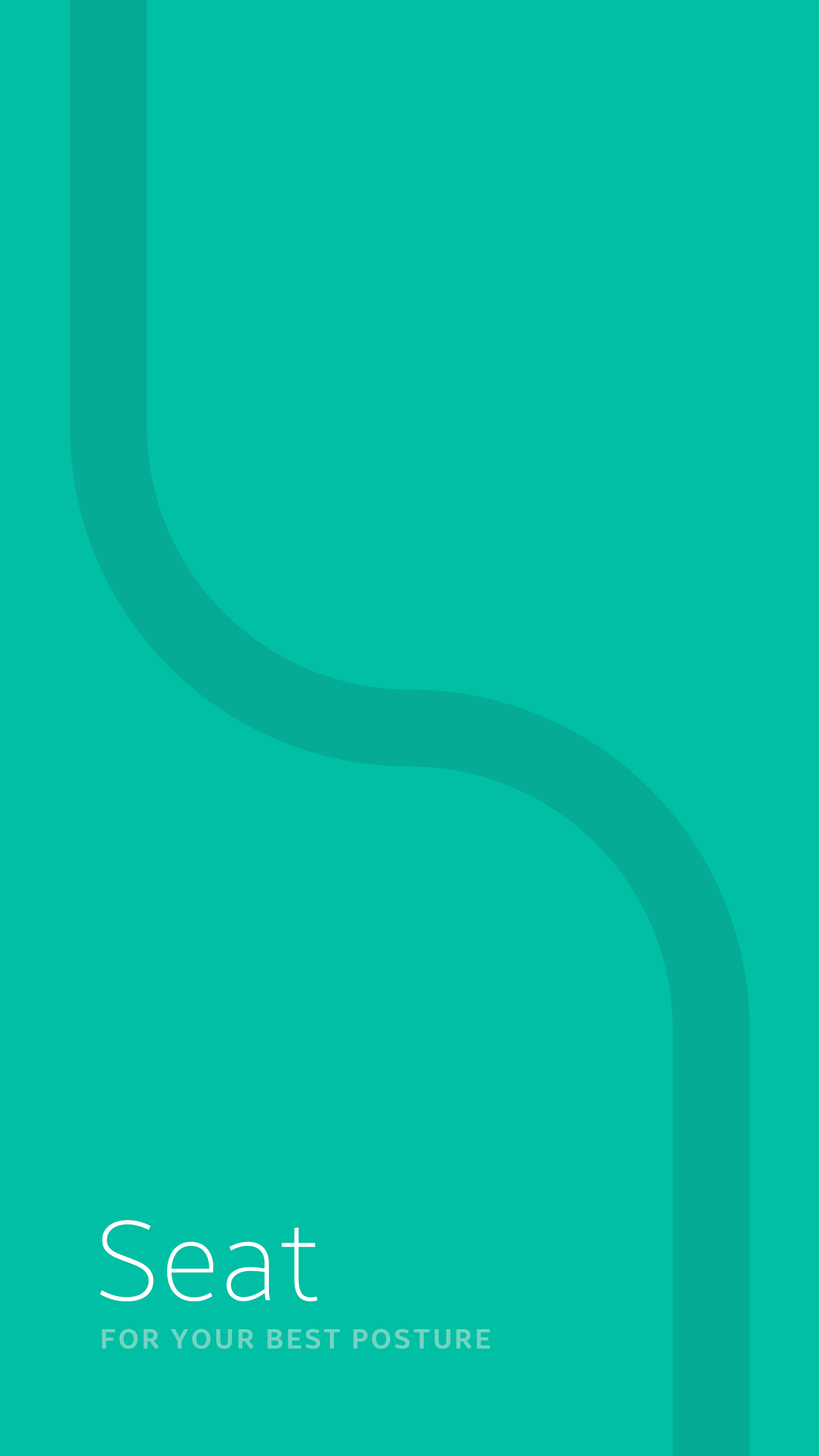
<style>
.page{position:relative;width:819px;height:1456px;background:#00bfa5}
.page>*{position:absolute;margin:0}
.t1{font:111.5px "BreezeSans-Thin";letter-spacing:0.025em;color:#fffefe}
.t2{font:27.3px "BreezeSans-Bold";letter-spacing:0.1em;color:#74d3c2}
</style>
<div class="page">
<p class="t1" style="left:100px;top:1220px;width:217px;height:81px">Seat</p>
<p class="t2" style="left:102px;top:1329px;width:388px;height:20px">FOR YOUR BEST POSTURE</p>
</div>
